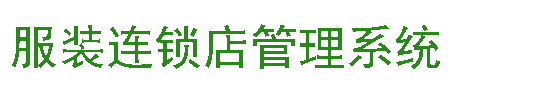
<style>
.page{position:relative;width:546px;height:94px;background:#ffffff}
.page>*{position:absolute;margin:0}
.t1{font:48px "SimHei";color:#278917}
</style>
<div class="page">
<p class="t1" style="left:12px;top:24px;width:428px;height:45px">服装连锁店管理系统</p>
</div>
